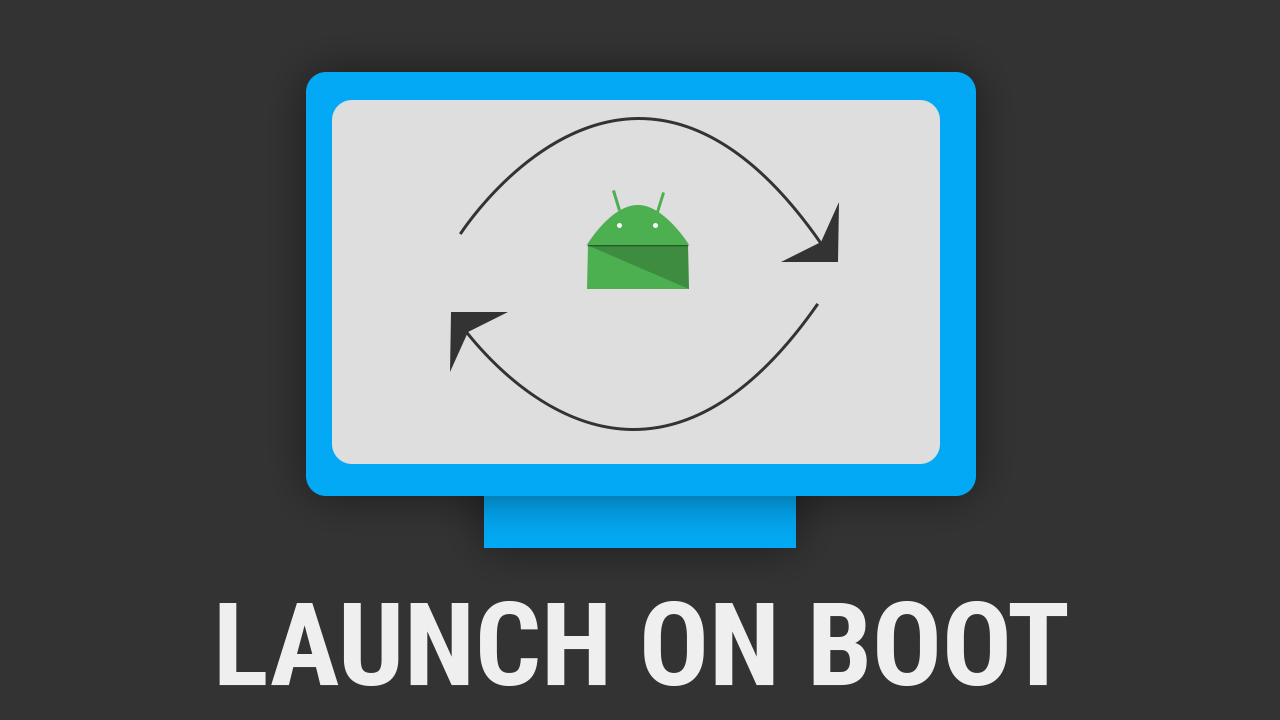
<style>
.page{position:relative;width:1280px;height:720px;background:#333333}
.page>*{position:absolute;margin:0}
.t1{font:116px "RobotoCondensed-Bold";color:#efefef}
</style>
<div class="page">
<p class="t1" style="left:219px;top:601px;width:849px;height:85px">LAUNCH ON BOOT</p>
</div>
